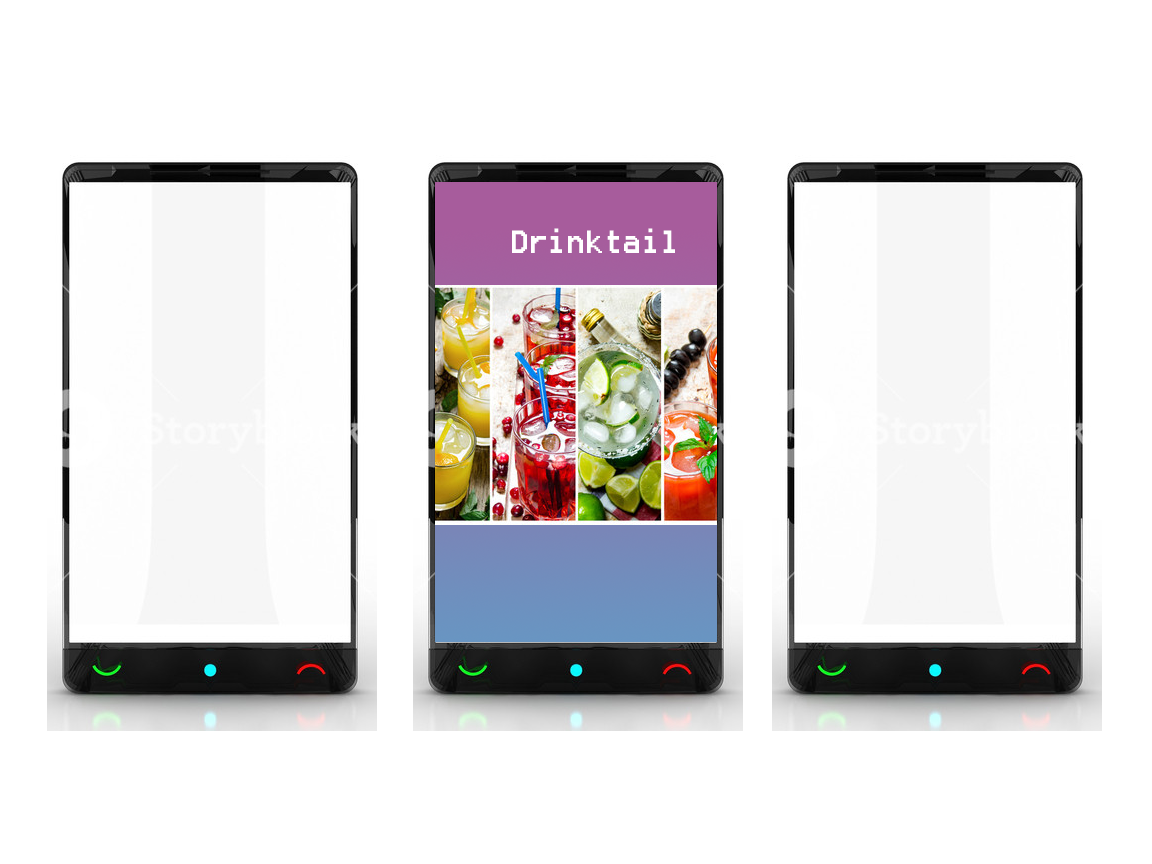
<style>
.page{position:relative;width:1152px;height:864px;background:#ffffff}
.page>*{position:absolute;margin:0}
.t1{font:40px "8514oem";color:#ffffff}
</style>
<div class="page">
<p class="t1" style="left:512px;top:228px;width:163px;height:25px">Drinktail</p>
</div>
